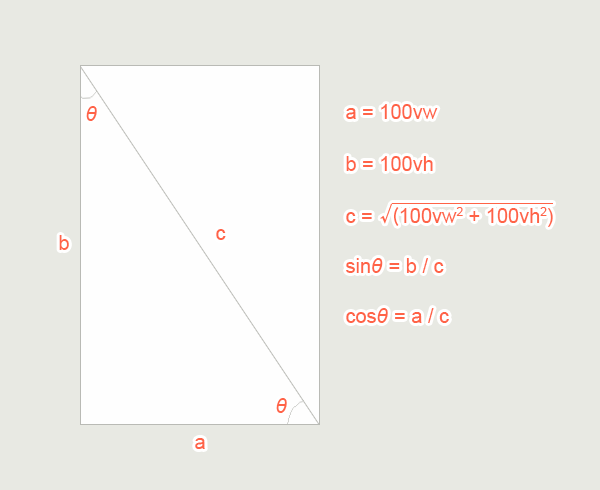
<style>
.page{position:relative;width:600px;height:490px;background:#e8e9e3}
.page>*{position:absolute;margin:0}
.t1{font:20px "Arial-ItalicMT";color:#ff6347}
.t2{font:20px "ArialMT";color:#ff6347}
.t3{font:20px "HiraKakuProN-W3";color:#ff6347}
</style>
<div class="page">
<p class="t1" style="left:86px;top:106px;width:11px;height:15px">θ</p>
<p class="t2" style="left:346px;top:104px;width:92px;height:15px">a = 100vw</p>
<p class="t2" style="left:346px;top:156px;width:87px;height:15px">b = 100vh</p>
<p class="t2" style="left:346px;top:207px;width:207px;height:20px">c = <span class="t3">  (</span>100vw2 + 100vh2)</p>
<p class="t2" style="left:216px;top:229px;width:10px;height:11px">c</p>
<p class="t2" style="left:59px;top:235px;width:10px;height:15px">b</p>
<p class="t2" style="left:346px;top:258px;width:98px;height:15px">sin<span class="t1">θ </span>= b / c</p>
<p class="t2" style="left:346px;top:308px;width:103px;height:15px">cos<span class="t1">θ </span>= a / c</p>
<p class="t1" style="left:276px;top:398px;width:11px;height:15px">θ</p>
<p class="t2" style="left:195px;top:438px;width:10px;height:11px">a</p>
</div>
